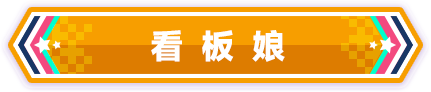
<style>
.page{position:relative;width:431px;height:92px;background:#f79e00}
.page>*{position:absolute;margin:0}
.t1{font:34px "MiSans-Heavy";letter-spacing:0.5em;color:#ffffff}
</style>
<div class="page">
<p class="t1" style="left:151px;top:30px;width:134px;height:32px">看板娘</p>
</div>
